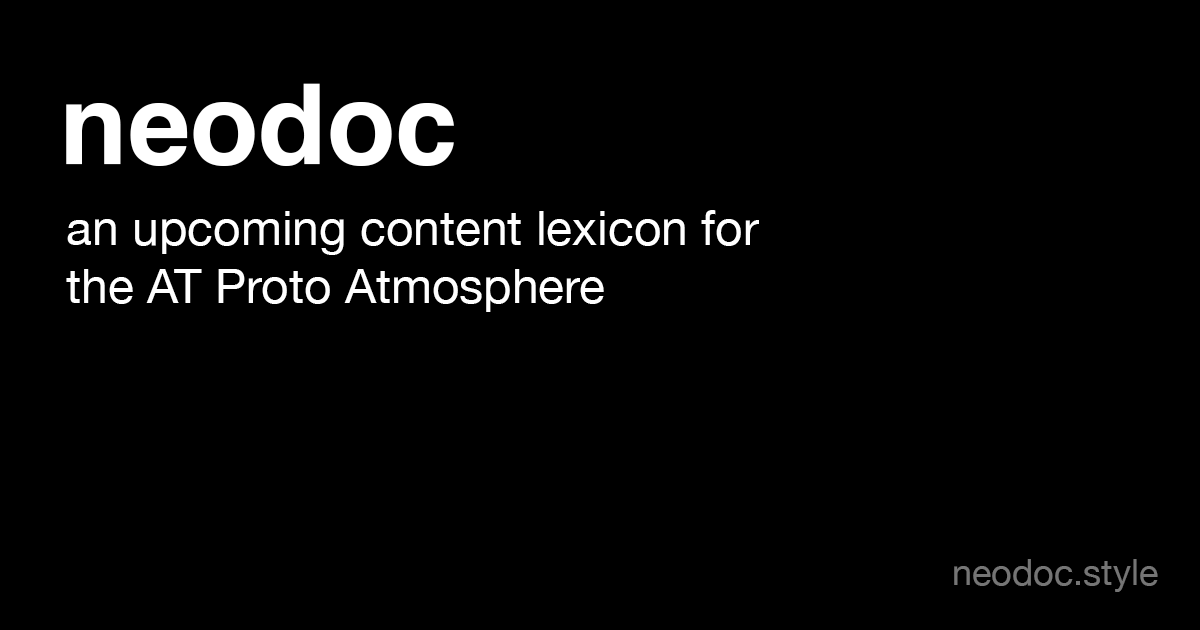
<style>
.page{position:relative;width:1200px;height:630px;background:#000000}
.page>*{position:absolute;margin:0}
.t1{font:112px "Helvetica-Bold";color:#ffffff}
.t2{font:48px "HelveticaNeue";color:#ffffff}
.t3{font:36px "HelveticaNeue";color:#757575}
</style>
<div class="page">
<p class="t1" style="left:66px;top:83px;width:388px;height:83px">neodoc</p>
<p class="t2" style="left:66px;top:210px;width:693px;height:102px">an upcoming content lexicon for <br>the AT Proto Atmosphere</p>
<p class="t3" style="left:954px;top:559px;width:204px;height:33px">neodoc.style</p>
</div>
